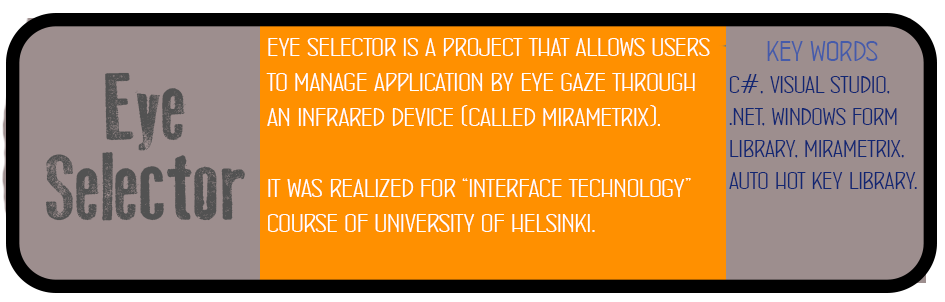
<style>
.page{position:relative;width:945px;height:302px;background:#ff9000}
.page>*{position:absolute;margin:0}
.t1{font:29.3px "ConcursoItalianBTNWide";color:#ffffff}
.t2{font:26.7px "ConcursoItalianBTNWide";color:#112672}
.t3{font:32px "ConcursoItalianBTNWide";color:#455baa}
.t4{font:93.3px "OldPress";color:#525252}
.t5{font:80px "ConcursoItalianBTNWide";color:#525252}
</style>
<div class="page">
<p class="t1" style="left:266px;top:38px;width:444px;height:194px">eye selector is a project that allows users <br>to manage application by eye gaze through <br>an infrared device (called mirametrix).<br><br>it was realized for “interface technology”<br>course of university of helsinki.</p>
<p class="t2" style="left:729px;top:41px;width:188px;height:148px"><span class="t3">     key words<br></span>c#, visual studio,<br>.net, windows form <br>library, mirametrix,<br>auto hot key library.</p>
<p class="t4" style="left:105px;top:72px;width:81px;height:79px"><span class="t5"> </span>Eye</p>
<p class="t4" style="left:46px;top:152px;width:199px;height:69px">Selector</p>
</div>
